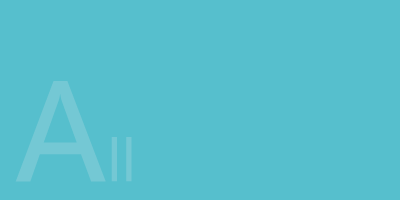
<style>
.page{position:relative;width:400px;height:200px;background:#56bfcd}
.page>*{position:absolute;margin:0}
.t1{font:132.7px "MicrosoftYaHei";color:#74c8d4}
.t2{font:55.5px "MicrosoftYaHei";color:#74c8d4}
</style>
<div class="page">
<p class="t1" style="left:15px;top:81px;width:91px;height:101px">A</p>
<p class="t2" style="left:111px;top:137px;width:21px;height:45px">ll</p>
</div>
